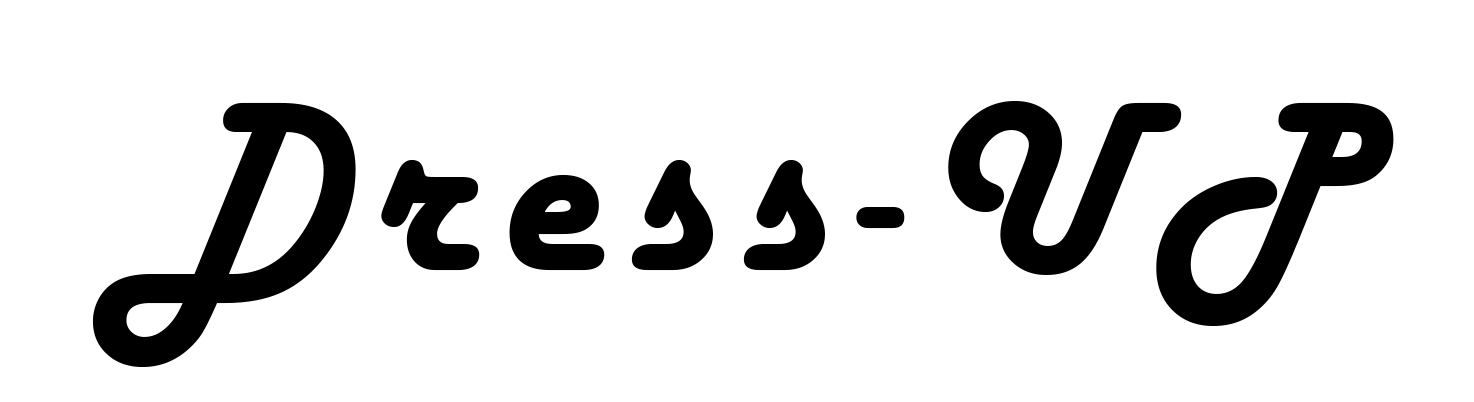
<style>
.page{position:relative;width:1474px;height:402px;background:#ffffff}
.page>*{position:absolute;margin:0}
.t1{font:250px "HarlowSolid";letter-spacing:0.1em;color:#000000}
</style>
<div class="page">
<p class="t1" style="left:92px;top:100px;width:1302px;height:267px">Dress-UP</p>
</div>
